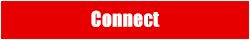
<style>
.page{position:relative;width:250px;height:40px;background:#e70000}
.page>*{position:absolute;margin:0}
.t1{font:20px "Impact";color:#fefffe}
</style>
<div class="page">
<p class="t1" style="left:91px;top:10px;width:69px;height:17px">Connect</p>
</div>
